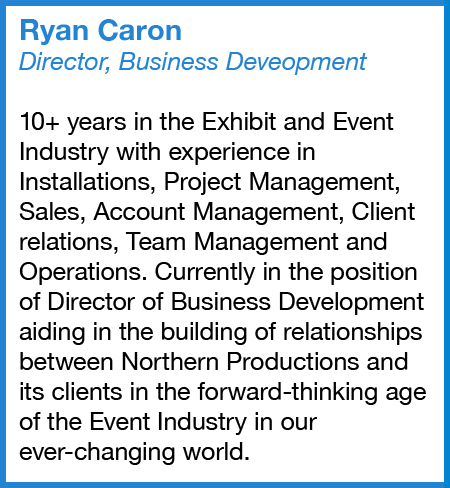
<style>
.page{position:relative;width:450px;height:488px;background:#ffffff}
.page>*{position:absolute;margin:0}
.t1{font:25px "HelveticaNeue";color:#000000}
.t2{font:29.2px "HelveticaNeue-Bold";color:#2384d3}
.t3{font:25px "HelveticaNeue-Italic";color:#2384d3}
</style>
<div class="page">
<p class="t1" style="left:19px;top:19px;width:407px;height:446px;text-align:right"><span class="t2">Ryan Caron<br></span><span class="t3">Director, Business Deveopment<br></span><br>10+ years in the Exhibit and Event Industry with experience in Installations, Project Management, Sales, Account Management, Client relations, Team Management and Operations. Currently in the position of Director of Business Development aiding in the building of relationships between Northern Productions and its clients in the forward-thinking age of the Event Industry in our ever-changing world.</p>
</div>
